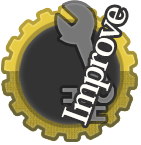
<style>
.page{position:relative;width:141px;height:145px;background:#ffffff}
.page>*{position:absolute;margin:0}
.t1{font:36px "HeiseiMinStd-W7";letter-spacing:-0.04em;color:#fffef9}
</style>
<div class="page">
<p class="t1" style="left:61px;top:7px;width:65px;height:119px;rotate:-70deg">Improve</p>
</div>
